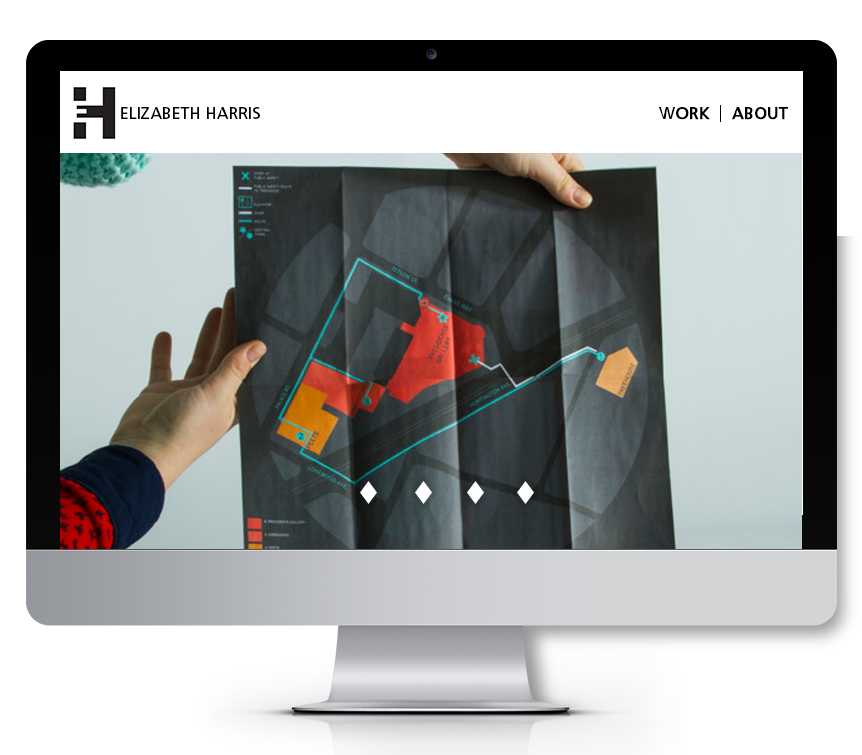
<style>
.page{position:relative;width:862px;height:755px;background:#ffffff}
.page>*{position:absolute;margin:0}
.t1{font:16px "Frutiger-Roman";color:#000000;text-transform:uppercase}
.t2{font:16px "Frutiger-Roman";color:#000000;text-transform:uppercase;font-weight:bold}
</style>
<div class="page">
<p class="t1" style="left:121px;top:107px;width:139px;height:12px">Elizabeth Harris</p>
<p class="t2" style="left:659px;top:107px;width:129px;height:13px"><span class="t1">W</span>ork about</p>
</div>
